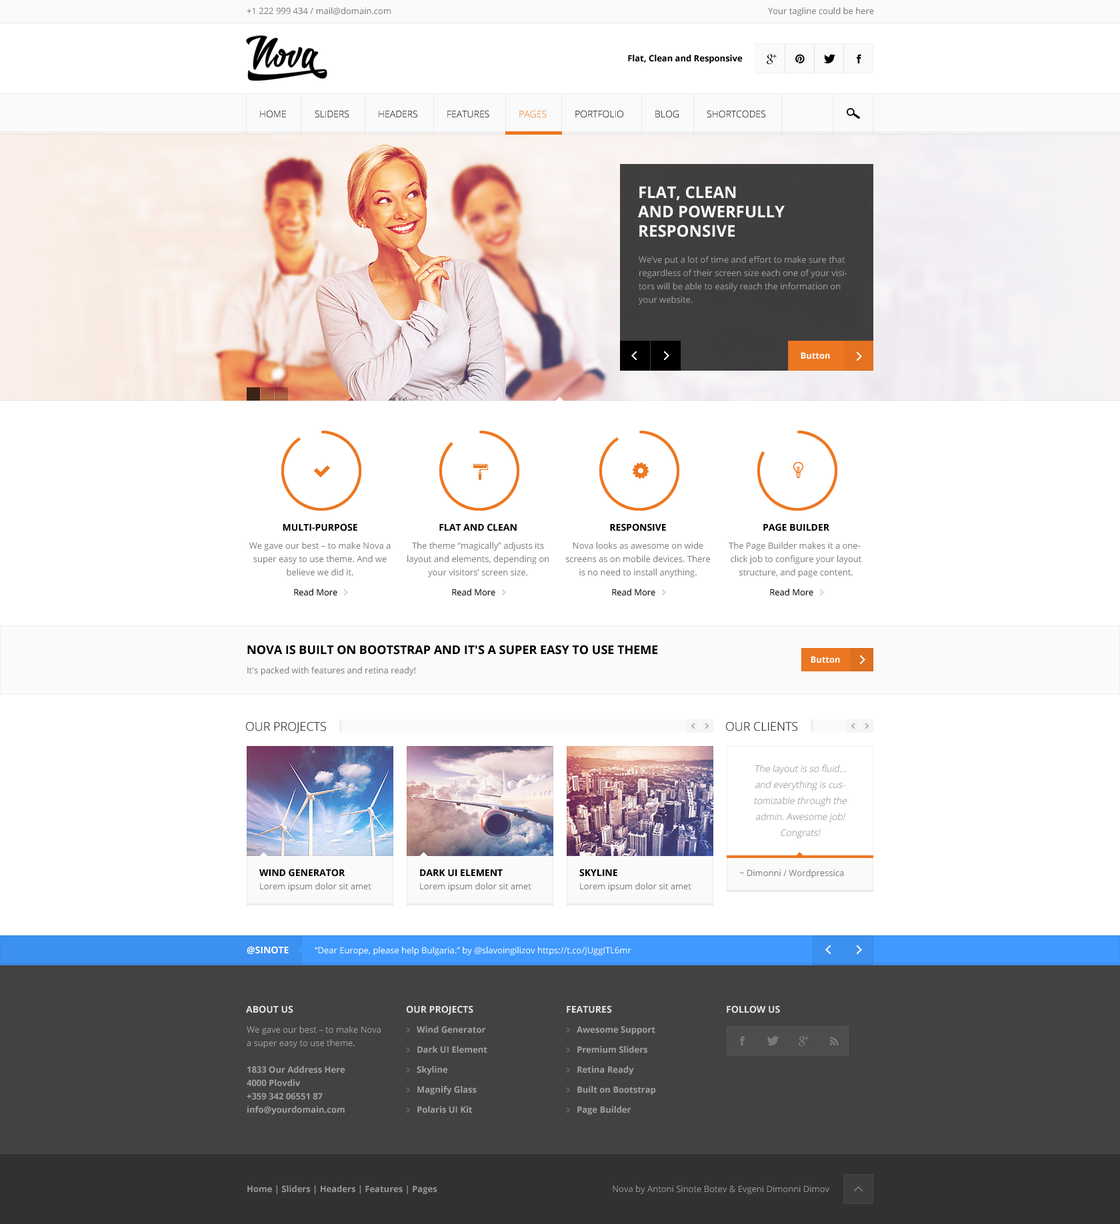
<style>
.page{position:relative;width:1120px;height:1224px;background:#ffffff}
.page>*{position:absolute;margin:0}
.t1{font:8.7px "OpenSans";color:#7d7d7d}
.t2{font:8.7px "OpenSans-Bold";color:#000000}
.t3{font:9.3px "OpenSans-Light";text-transform:uppercase}
.t4{font:9.3px "OpenSans-Light";color:#000000;text-transform:uppercase}
.t5{font:16px "OpenSans-Bold";color:#ffffff;text-transform:uppercase}
.t6{font:8.7px/13.3px "OpenSans";color:#9f9e9f}
.t7{font:8.7px "OpenSans-Bold";color:#ffffff}
.t8{font:9.3px "OpenSans-Bold";color:#000000;text-transform:uppercase}
.t9{font:8.7px/13.3px "OpenSans";color:#7f7f7f}
.t10{font:8.7px "OpenSans";color:#000000}
.t11{font:12px "OpenSans-Bold";color:#000000;text-transform:uppercase}
.t12{font:12px "OpenSans-Light";color:#000000;text-transform:uppercase}
.t13{font:9.3px/16px "OpenSans-Light";color:#7f7f7f;font-style:italic}
.t14{font:9.3px "OpenSans-Bold";color:#ffffff;text-transform:uppercase}
.t15{font:8.7px "OpenSans";color:#ffffff}
.t16{font:9.3px "OpenSans-Bold";color:#e4e4e4;text-transform:uppercase}
.t17{font:8.7px/13.3px "OpenSans-Bold";color:#a1a1a1}
.t18{font:8.7px/13.3px "OpenSans";color:#a1a1a1}
.t19{font:8.7px/20px "OpenSans-Bold";color:#a1a1a1}
.t20{font:8.7px "OpenSans-Bold";color:#989898}
.t21{font:8.7px "OpenSans";color:#989898}
</style>
<div class="page">
<p class="t1" style="left:247px;top:7px;width:144px;height:8px">+1 222 999 434 / mail@domain.com</p>
<p class="t1" style="left:768px;top:7px;width:106px;height:9px">Your tagline could be here</p>
<p class="t2" style="left:628px;top:55px;width:115px;height:8px">Flat, Clean and Responsive</p>
<p class="t3" style="left:260px;top:110px;width:26px;height:8px">Home</p>
<p class="t3" style="left:315px;top:110px;width:34px;height:8px">Sliders</p>
<p class="t3" style="left:379px;top:110px;width:38px;height:8px">Headers</p>
<p class="t3" style="left:447px;top:110px;width:42px;height:8px">Features</p>
<p class="t3" style="left:519px;top:110px;width:28px;height:8px">Pages</p>
<p class="t3" style="left:575px;top:110px;width:48px;height:8px">Portfolio</p>
<p class="t4" style="left:655px;top:110px;width:24px;height:8px">blog</p>
<p class="t3" style="left:707px;top:110px;width:58px;height:8px">Shortcodes</p>
<p class="t5" style="left:638px;top:186px;width:147px;height:51px">Flat, Clean<br>And powerfully<br>Responsive</p>
<p class="t6" style="left:639px;top:256px;width:208px;height:49px">We’ve put a lot of time and effort to make sure that regardless of their screen size each one of your visitors will be able to easily reach the information on your website.</p>
<p class="t7" style="left:801px;top:352px;width:29px;height:7px">Button</p>
<p class="t8" style="left:283px;top:523px;width:74px;height:8px">Multi-Purpose</p>
<p class="t8" style="left:439px;top:523px;width:78px;height:8px">Flat and Clean</p>
<p class="t8" style="left:610px;top:523px;width:56px;height:8px">Responsive</p>
<p class="t8" style="left:763px;top:523px;width:66px;height:8px">PAge Builder</p>
<p class="t9" style="left:249px;top:542px;width:142px;height:34px;text-align:center">We gave our best – to make Nova a super easy to use theme. And we believe we did it.</p>
<p class="t9" style="left:407px;top:542px;width:142px;height:35px;text-align:center">The theme “magically” adjusts its layout and elements, depending on your visitors’ screen size.</p>
<p class="t9" style="left:566px;top:542px;width:144px;height:35px;text-align:center">Nova looks as awesome on wide screens as on mobile devices. There is no need to install anything.</p>
<p class="t9" style="left:729px;top:542px;width:132px;height:35px;text-align:center">The Page Builder makes it a one-click job to configure your layout structure, and page content.</p>
<p class="t10" style="left:294px;top:589px;width:43px;height:7px">Read More</p>
<p class="t10" style="left:452px;top:589px;width:43px;height:7px">Read More</p>
<p class="t10" style="left:612px;top:589px;width:43px;height:7px">Read More</p>
<p class="t10" style="left:770px;top:589px;width:43px;height:7px">Read More</p>
<p class="t11" style="left:247px;top:645px;width:411px;height:10px">NOVA IS BUILT ON BOOTSTRAP AND IT'S A SUPER EASY TO USE THEME</p>
<p class="t7" style="left:811px;top:656px;width:29px;height:7px">Button</p>
<p class="t1" style="left:247px;top:667px;width:168px;height:8px">It's packed with features and retina ready!</p>
<p class="t12" style="left:246px;top:722px;width:80px;height:11px">Our Projects</p>
<p class="t12" style="left:726px;top:722px;width:71px;height:9px">Our clients</p>
<p class="t13" style="left:754px;top:765px;width:93px;height:74px;text-align:center">The layout is so fluid… and everything is customizable through the admin. Awesome job! Congrats!</p>
<p class="t8" style="left:259px;top:869px;width:86px;height:8px">Wind Generator</p>
<p class="t8" style="left:420px;top:869px;width:83px;height:8px">Dark UI Element</p>
<p class="t8" style="left:579px;top:869px;width:38px;height:8px">Skyline</p>
<p class="t1" style="left:739px;top:869px;width:105px;height:9px">~ Dimonni / Wordpressica</p>
<p class="t1" style="left:260px;top:883px;width:111px;height:8px">Lorem ipsum dolor sit amet</p>
<p class="t1" style="left:420px;top:883px;width:111px;height:8px">Lorem ipsum dolor sit amet</p>
<p class="t1" style="left:580px;top:883px;width:111px;height:8px">Lorem ipsum dolor sit amet</p>
<p class="t14" style="left:247px;top:946px;width:42px;height:8px">@sinote</p>
<p class="t15" style="left:315px;top:947px;width:316px;height:8px">“Dear Europe, please help Bulgaria.” by @slavoingilizov https://t.co/JUggITL6mr</p>
<p class="t16" style="left:246px;top:1005px;width:47px;height:8px">About us</p>
<p class="t16" style="left:406px;top:1005px;width:67px;height:10px">Our Projects</p>
<p class="t16" style="left:567px;top:1005px;width:45px;height:8px">Features</p>
<p class="t16" style="left:727px;top:1005px;width:53px;height:8px">Follow us</p>
<p class="t17" style="left:247px;top:1026px;width:134px;height:89px"><span class="t18">We gave our best – to make Nova <br>a super easy to use theme.<br><br></span>1833 Our Address Here<br>4000 Plovdiv<br>+359 342 06551 87<br>info@yourdomain.com</p>
<p class="t19" style="left:417px;top:1026px;width:70px;height:87px">Wind Generator<br>Dark UI Element<br>Skyline<br>Magnify Glass<br>Polaris UI Kit</p>
<p class="t19" style="left:577px;top:1026px;width:79px;height:89px">Awesome Support<br>Premium Sliders<br>Retina Ready<br>Built on Bootstrap<br>Page Builder</p>
<p class="t20" style="left:247px;top:1185px;width:190px;height:9px">Home | Sliders | Headers | Features | Pages</p>
<p class="t21" style="left:613px;top:1185px;width:216px;height:9px">Nova by Antoni Sinote Botev &amp; Evgeni Dimonni Dimov</p>
</div>
